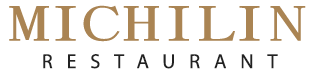
<style>
.page{position:relative;width:320px;height:76px;background:#ffffff}
.page>*{position:absolute;margin:0}
.t1{font:46.6px "DFKaiShu-SB-Estd-BF";letter-spacing:0.67em;color:#aa8453;scale:1.82 1}
.t2{font:46.6px "DFKaiShu-SB-Estd-BF";letter-spacing:0.67em;color:#aa8453;scale:1.69 1}
.t3{font:20.2px "MyriadPro-Regular";letter-spacing:0.685em;color:#222222}
</style>
<div class="page">
<p class="t1" style="left:9px;top:6px;width:40px;height:35px">M</p>
<p class="t1" style="left:55px;top:6px;width:21px;height:35px">I</p>
<p class="t2" style="left:83px;top:5px;width:37px;height:37px">C</p>
<p class="t2" style="left:123px;top:6px;width:36px;height:35px">H</p>
<p class="t1" style="left:168px;top:6px;width:21px;height:35px">I</p>
<p class="t2" style="left:199px;top:6px;width:36px;height:35px">L</p>
<p class="t1" style="left:239px;top:6px;width:21px;height:35px">I</p>
<p class="t2" style="left:270px;top:6px;width:36px;height:35px">N</p>
<p class="t3" style="left:43px;top:54px;width:235px;height:15px">RESTAURANT</p>
<p class="t3" style="left:43px;top:54px;width:235px;height:15px">RESTAURANT</p>
</div>
